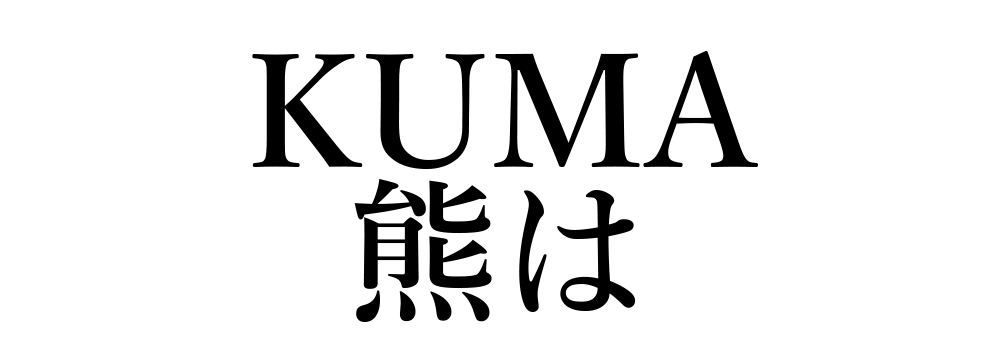
<style>
.page{position:relative;width:1000px;height:350px;background:#ffffff}
.page>*{position:absolute;margin:0}
.t1{font:155px "YuMincho-Demibold";color:#000000}
</style>
<div class="page">
<p class="t1" style="left:252px;top:51px;width:506px;height:118px">KUMA</p>
<p class="t1" style="left:354px;top:179px;width:282px;height:143px">熊は</p>
</div>
